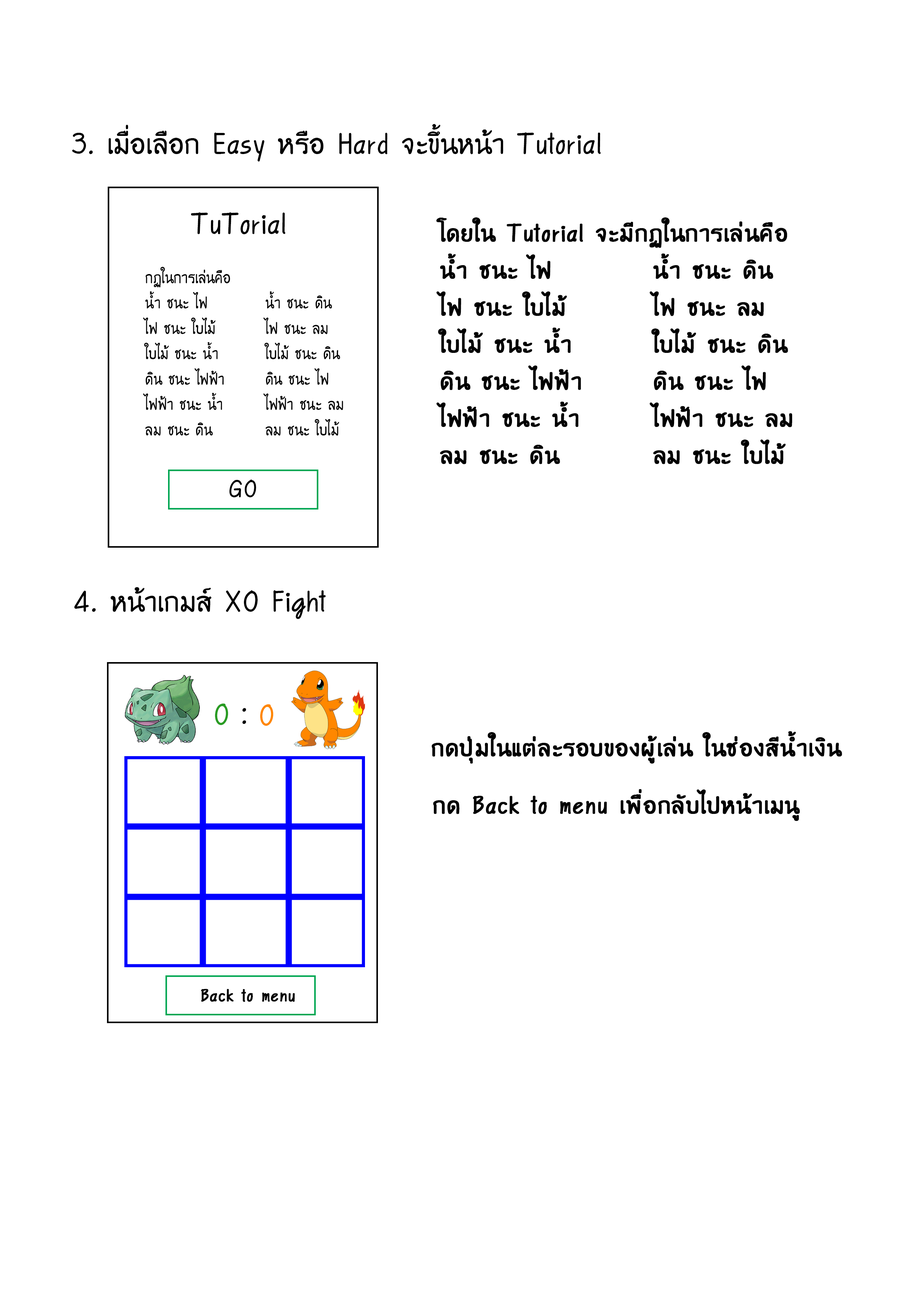
<style>
.page{position:relative;width:918px;height:1299px;background:#ffffff}
.page>*{position:absolute;margin:0}
.t1{font:37px "WRTishKid";color:#000000}
.t2{font:30.9px "WRTishKid";color:#000000;font-weight:bold}
.t3{font:21.1px "WRTishKid";color:#000000;scale:0.88 1}
.t4{font:30.9px "WRTishKid";color:#000000}
.t5{font:37px "WRTishKid";color:#299b23}
.t6{font:37px "WRTishKid";color:#ff8700}
.t7{font:21.6px "WRTishKid";color:#000000;font-weight:bold}
</style>
<div class="page">
<p class="t1" style="left:72px;top:124px;width:529px;height:38px">3. เมื่อเลือก Easy หรือ Hard จะขึ้นหน้า Tutorial</p>
<p class="t1" style="left:191px;top:212px;width:94px;height:22px">TuTorial</p>
<p class="t2" style="left:436px;top:217px;width:356px;height:247px;text-align:right">โดยใน Tutorial จะมีกฏในการเล่นคือ<br>น้ำ ชนะ ไฟ        น้ำ ชนะ ดิน<br>ไฟ ชนะ ใบไม้       ไฟ ชนะ ลม<br>ใบไม้ ชนะ น้ำ       ใบไม้ ชนะ ดิน<br>ดิน ชนะ ไฟฟ้า      ดิน ชนะ ไฟ<br>ไฟฟ้า ชนะ นำ้      ไฟฟ้า ชนะ ลม<br>ลม ชนะ ดิน       ลม ชนะ ใบไม้</p>
<p class="t3" style="left:143px;top:267px;width:200px;height:169px;text-align:right">กฏในการเล่นคือ<br>น้ำ ชนะ ไฟ        น้ำ ชนะ ดิน<br>ไฟ ชนะ ใบไม้       ไฟ ชนะ ลม<br>ใบไม้ ชนะ น้ำ       ใบไม้ ชนะ ดิน<br>ดิน ชนะ ไฟฟ้า      ดิน ชนะ ไฟ<br>ไฟฟ้า ชนะ นำ้      ไฟฟ้า ชนะ ลม<br>ลม ชนะ ดิน       ลม ชนะ ใบไม้</p>
<p class="t4" style="left:229px;top:479px;width:27px;height:18px">GO</p>
<p class="t1" style="left:74px;top:587px;width:252px;height:32px">4. หน้าเกมส์ XO Fight</p>
<p class="t5" style="left:215px;top:703px;width:13px;height:22px">0</p>
<p class="t1" style="left:242px;top:708px;width:4px;height:16px">:</p>
<p class="t6" style="left:260px;top:704px;width:14px;height:22px">0</p>
<p class="t2" style="left:432px;top:731px;width:410px;height:32px">กดปุ่มในแต่ละรอบของผู้เล่น ในช่องสีน้ำเงิน</p>
<p class="t2" style="left:433px;top:789px;width:367px;height:32px">กด  Back to menu เพื่อกลับไปหน้าเมนู</p>
<p class="t7" style="left:201px;top:988px;width:94px;height:14px">Back to menu</p>
</div>
